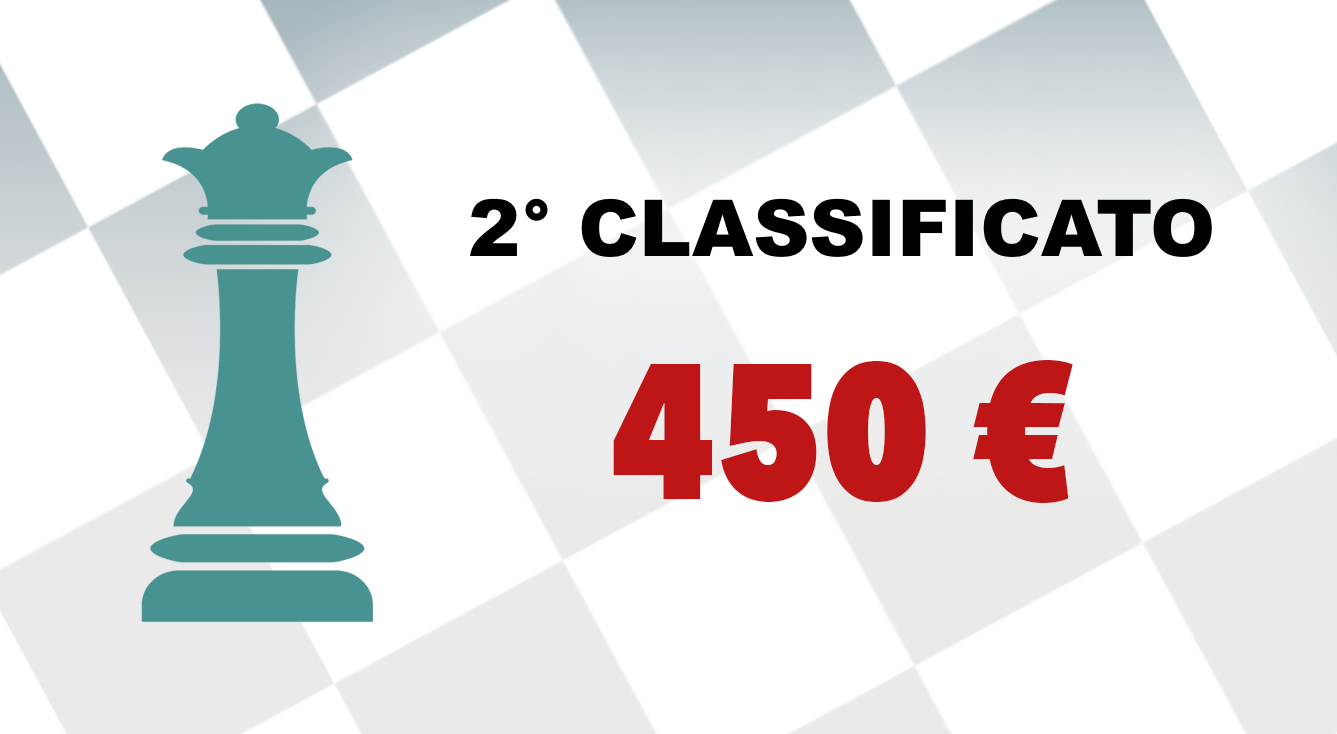
<style>
.page{position:relative;width:1337px;height:734px;background:#ffffff}
.page>*{position:absolute;margin:0}
.t1{font:78.5px "Arial-Black";color:#000000}
.t2{font:191px "AvenirNextCondensed-Heavy";color:#be1616}
</style>
<div class="page">
<p class="t1" style="left:470px;top:198px;width:742px;height:59px">2° CLASSIFICATO</p>
<p class="t2" style="left:613px;top:360px;width:460px;height:143px">450 €</p>
</div>
